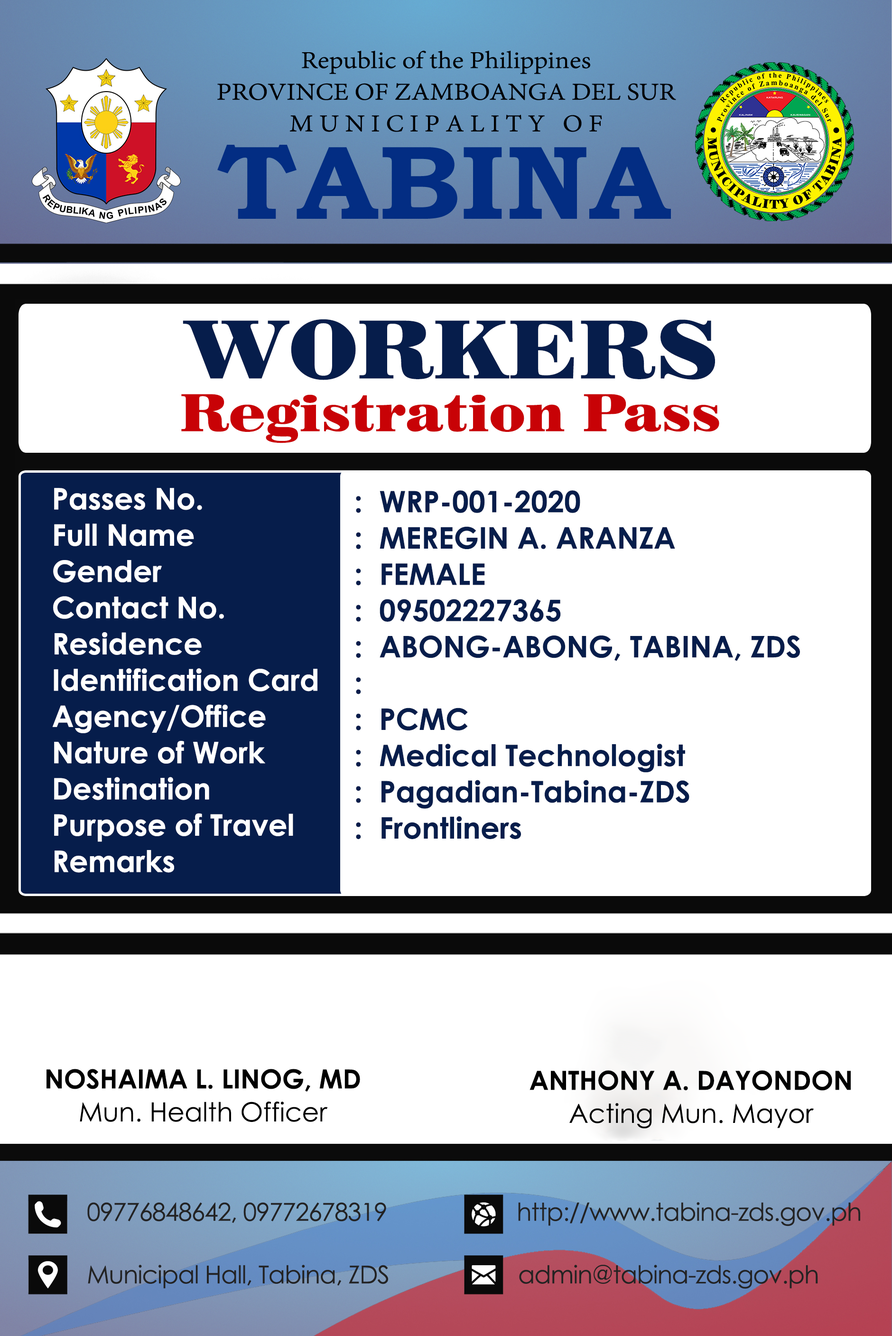
<style>
.page{position:relative;width:892px;height:1336px;background:#ffffff}
.page>*{position:absolute;margin:0}
.t1{font:52.7px/52.7px "Century725BT-Black";color:#c80206}
.t2{font:82.4px/59.3px "Century725BT-Black";color:#061d4b}
.t3{font:29.7px/36.3px "CenturyGothic-Bold";color:#ffffff}
.t4{font:29.7px/36.3px "CenturyGothic-Bold";color:#061d4b}
.t5{font:26.4px/33px "CenturyGothic-Bold";color:#000000}
.t6{font:26.4px/33px "CenturyGothic";color:#000000}
</style>
<div class="page">
<p class="t1" style="left:181px;top:319px;width:539px;height:124px;text-align:center"><span class="t2">WORKERS<br></span>Registration Pass</p>
<p class="t3" style="left:52px;top:488px;width:266px;height:385px">Passes No.<br>Full Name<br>Gender<br>Contact No.<br>Residence<br>Identification Card<br>Agency/Office<br>Nature of Work<br>Destination<br>Purpose of Travel<br>Remarks</p>
<p class="t4" style="left:356px;top:490px;width:444px;height:349px">:  WRP-001-2020<br>:  MEREGIN A. ARANZA<br>:  FEMALE<br>:  09502227365<br>:  ABONG-ABONG, TABINA, ZDS<br>:<br>:  PCMC<br>:  Medical Technologist<br>:  Pagadian-Tabina-ZDS<br>:  Frontliners</p>
<p class="t5" style="left:47px;top:1069px;width:313px;height:53px;text-align:center">NOSHAIMA L. LINOG, MD<br><span class="t6">Mun. Health Officer</span></p>
<p class="t5" style="left:530px;top:1070px;width:321px;height:59px;text-align:center">ANTHONY A. DAYONDON<span class="t6"><br>Acting Mun. Mayor</span></p>
</div>
